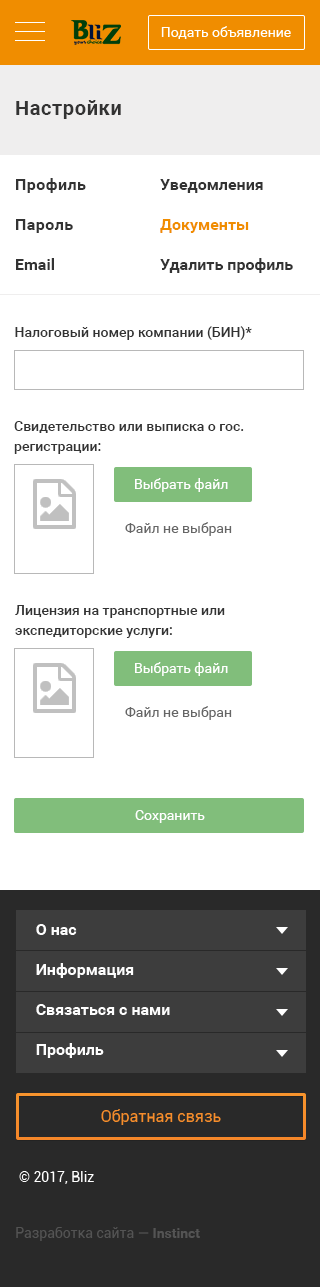
<style>
.page{position:relative;width:320px;height:1287px;background:#ffffff}
.page>*{position:absolute;margin:0}
.t1{font:20px "Roboto-Bold";letter-spacing:0.03em;color:#333333}
.t2{font:16px/40px "Roboto-Bold";letter-spacing:0.03em;color:#333333}
.t3{font:16px/40px "Roboto-Bold";color:#333333}
.t4{font:16px/40px "Roboto-Bold";color:#f08d00}
.t5{font:14px "Roboto-Medium";color:#333333}
.t6{font:14px/20px "Roboto-Medium";color:#333333}
.t7{font:14px "Roboto-Regular";color:#ffffff}
.t8{font:14px "Roboto-Regular";color:#666666}
</style>
<div class="page">
<p class="t1" style="left:16px;top:100px;width:105px;height:19px">Настройки</p>
<p class="t2" style="left:16px;top:178px;width:70px;height:92px">Профиль          <br>Пароль          <br><span class="t3">Email</span></p>
<p class="t3" style="left:160px;top:179px;width:133px;height:94px">Уведомления<span class="t4">         <br>Документы          <br></span>Удалить профиль</p>
<p class="t5" style="left:15px;top:326px;width:237px;height:14px">Налоговый номер компании (БИН)*</p>
<p class="t6" style="left:14px;top:421px;width:230px;height:33px">Свидетельство или выписка о гос. регистрации:</p>
<p class="t7" style="left:135px;top:478px;width:93px;height:14px">Выбрать файл</p>
<p class="t8" style="left:125px;top:522px;width:107px;height:14px">Файл не выбран</p>
<p class="t6" style="left:15px;top:605px;width:210px;height:33px">Лицензия на транспортные или экспедиторские услуги:</p>
<p class="t7" style="left:135px;top:662px;width:93px;height:14px">Выбрать файл</p>
<p class="t8" style="left:125px;top:706px;width:107px;height:14px">Файл не выбран</p>
<p class="t7" style="left:135px;top:810px;width:70px;height:13px">Сохранить</p>
</div>
